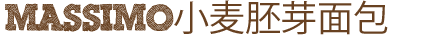
<style>
.page{position:relative;width:426px;height:35px;background:#ffffff}
.page>*{position:absolute;margin:0}
.t1{font:36px "ScribbleBoxDEMO";color:#684121}
.t2{font:36px "KozGoPr6N-Regular";color:#684121}
</style>
<div class="page">
<p class="t1" style="left:5px;top:0px;width:383px;height:35px">Massimo<span class="t2">小麦胚芽面包</span></p>
</div>
